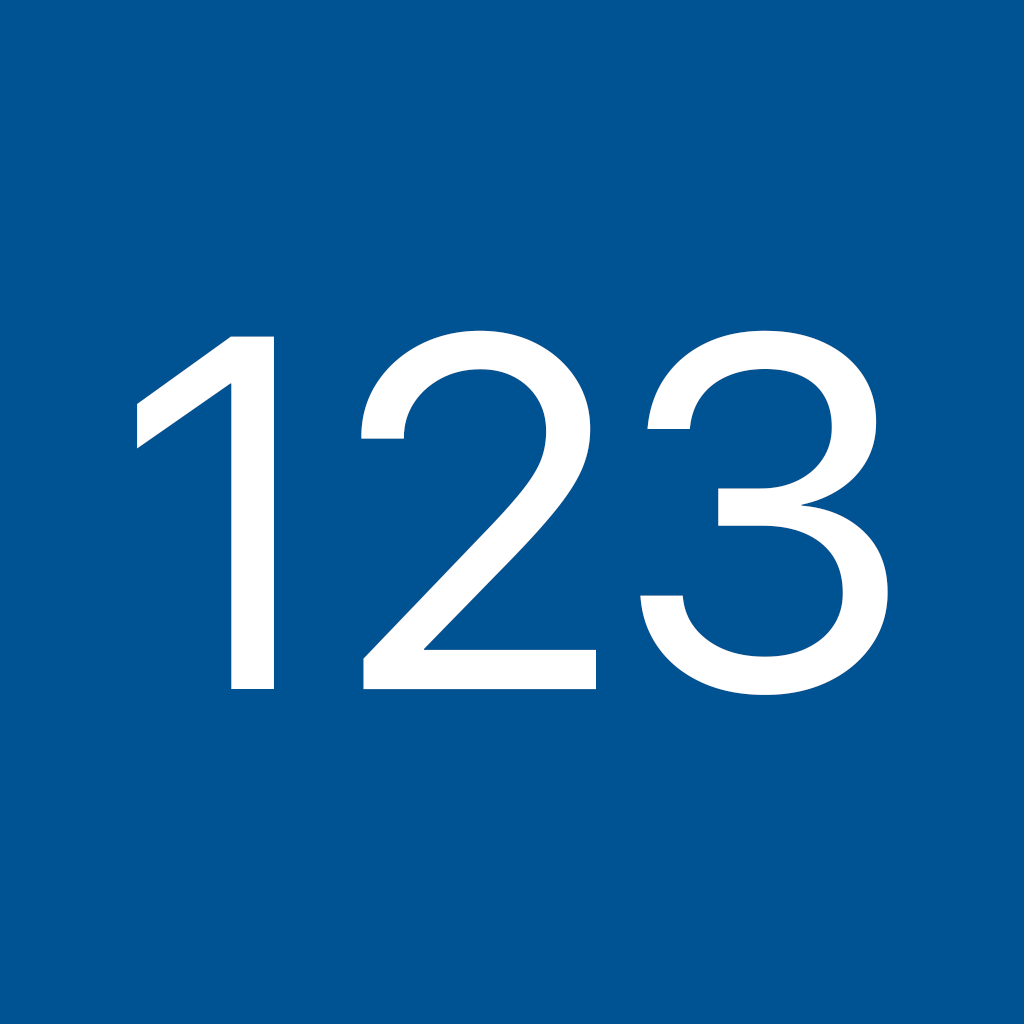
<style>
.page{position:relative;width:1024px;height:1024px;background:#005392}
.page>*{position:absolute;margin:0}
.t1{font:500px "SFPro-Regular";color:#ffffff}
</style>
<div class="page">
<p class="t1" style="left:137px;top:330px;width:751px;height:365px">123</p>
</div>
